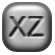
<style>
.page{position:relative;width:55px;height:55px;background:#ffffff}
.page>*{position:absolute;margin:0}
.t1{font:28px "ArialMT"}
</style>
<div class="page">
<p class="t1" style="left:9px;top:17px;width:35px;height:20px">XZ</p>
</div>
